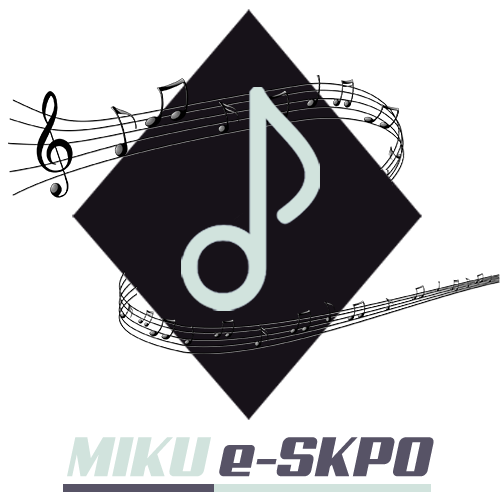
<style>
.page{position:relative;width:500px;height:500px;background:#ffffff}
.page>*{position:absolute;margin:0}
.t1{font:56.3px "Aero";color:#575366}
.t2{font:56.3px "Aero";color:#d1e3dd}
</style>
<div class="page">
<p class="t1" style="left:67px;top:437px;width:367px;height:40px"><span class="t2">MIKU </span>e-SKPO</p>
</div>
